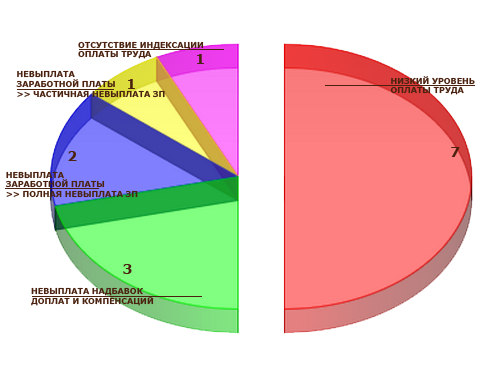
<style>
.page{position:relative;width:488px;height:374px;background:#ffffff}
.page>*{position:absolute;margin:0}
.t1{font:8px "Verdana-Bold";color:#4a220f}
</style>
<div class="page">
<p class="t1" style="left:78px;top:41px;width:126px;height:18px">ОТСУТСТВИЕ ИНДЕКСАЦИИ<br>ОПЛАТЫ ТРУДА</p>
<p class="t1" style="left:16px;top:70px;width:149px;height:28px">НЕВЫПЛАТА <br>ЗАРАБОТНОЙ ПЛАТЫ<br>&gt;&gt; ЧАСТИЧНАЯ НЕВЫПЛАТА ЗП</p>
<p class="t1" style="left:390px;top:76px;width:85px;height:19px">НИЗКИЙ УРОВЕНЬ<br>ОПЛАТЫ ТРУДА</p>
<p class="t1" style="left:6px;top:171px;width:132px;height:27px">НЕВЫПЛАТА <br>ЗАРАБОТНОЙ ПЛАТЫ<br>&gt;&gt; ПОЛНАЯ НЕВЫПЛАТА ЗП</p>
<p class="t1" style="left:31px;top:287px;width:123px;height:19px">НЕВЫПЛАТА НАДБАВОК<br>ДОПЛАТ И КОМПЕНСАЦИЙ</p>
</div>
